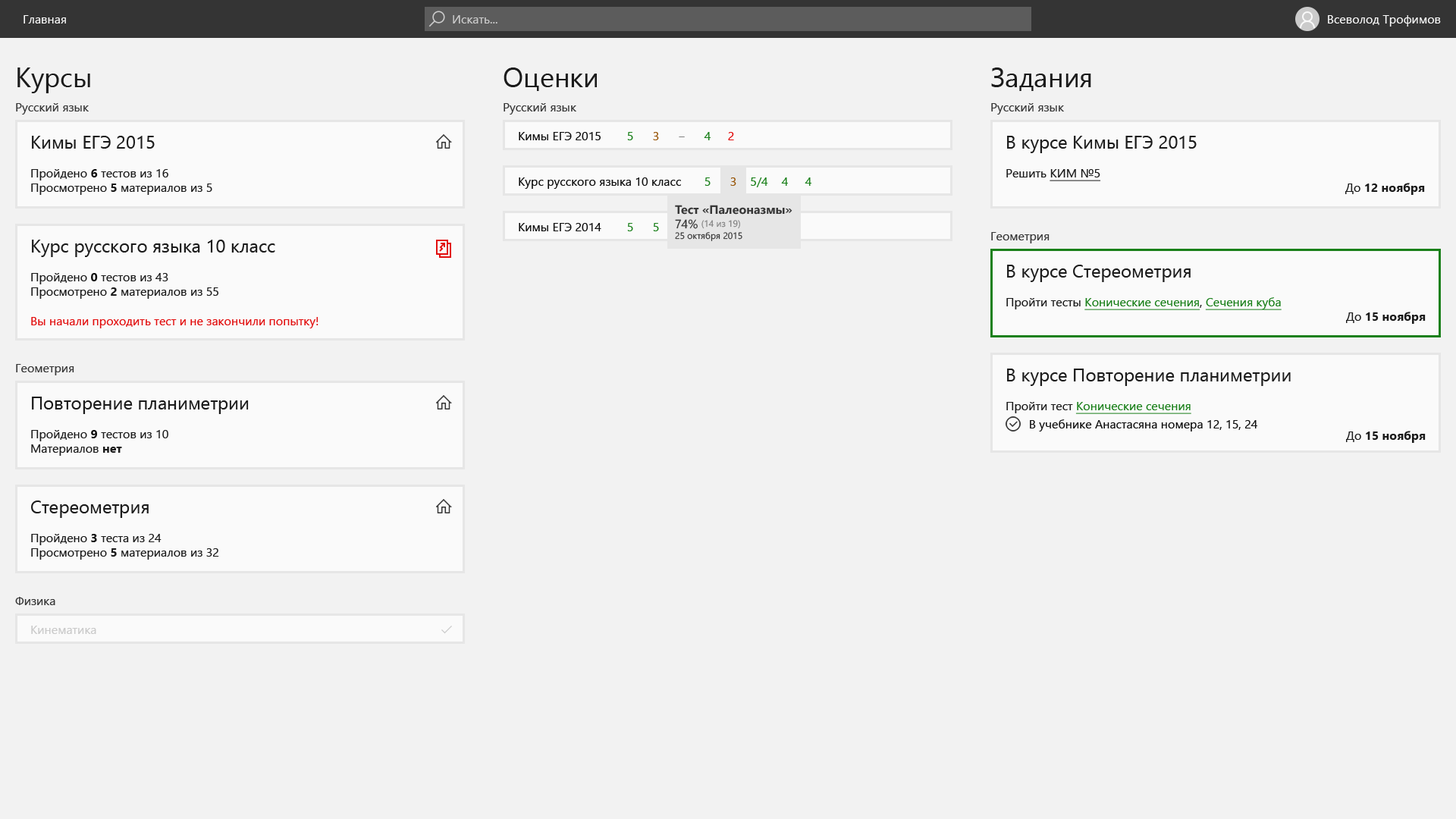
<style>
.page{position:relative;width:1456px;height:819px;background:#f2f2f2}
.page>*{position:absolute;margin:0}
.t1{font:12.1px "SegoeUI";color:#fafafa}
.t2{font:12.1px "SegoeUI";color:#cbcbcb}
.t3{font:27.3px "SegoeUI";color:#1b1b1b}
.t4{font:12.1px "SegoeUI";color:#373737}
.t5{font:12.1px "SegoeUI";color:#1b1b1b}
.t6{font:18.2px "SegoeUI";color:#1b1b1b}
.t7{font:12.1px "SegoeUI-Bold";color:#0f0f0f}
.t8{font:12.1px "SegoeUI-Bold";color:#1b1b1b}
.t9{font:12.1px "SegoeUI";color:#0f0f0f}
.t10{font:12.1px "SegoeUI";color:#1a801a}
.t11{font:12.1px "SegoeUI";color:#975405}
.t12{font:12.1px "SegoeUI";color:#808080}
.t13{font:12.1px "SegoeUI";color:#e20e0e}
.t14{font:12.1px "SegoeUI";color:#1b1b1b;text-decoration:underline}
.t15{font:12.1px "SegoeUI-Bold";color:#373737}
.t16{font:9.1px "SegoeUI";color:#808080}
.t17{font:9.1px "SegoeUI";color:#373737}
.t18{font:12.1px "SegoeUI";color:#1a801a;text-decoration:underline}
.t19{font:12.1px "SegoeUI";color:#cacaca}
</style>
<div class="page">
<p class="t1" style="left:24px;top:15px;width:42px;height:9px">Главная</p>
<p class="t2" style="left:453px;top:15px;width:44px;height:9px">Искать...</p>
<p class="t1" style="left:1328px;top:15px;width:113px;height:12px">Всеволод Трофимов</p>
<p class="t3" style="left:17px;top:67px;width:73px;height:26px">Курсы</p>
<p class="t3" style="left:504px;top:67px;width:93px;height:24px">Оценки</p>
<p class="t3" style="left:991px;top:67px;width:100px;height:24px">Задания</p>
<p class="t4" style="left:16px;top:103px;width:73px;height:12px">Русский язык</p>
<p class="t4" style="left:504px;top:103px;width:72px;height:12px">Русский язык</p>
<p class="t4" style="left:991px;top:103px;width:73px;height:12px">Русский язык</p>
<p class="t5" style="left:31px;top:136px;width:181px;height:59px"><span class="t6">Кимы ЕГЭ 2015<br></span><br>Пройдено <span class="t7">6</span> тестов из 16<br>Просмотрено <span class="t8">5</span> материалов из 5</p>
<p class="t9" style="left:519px;top:132px;width:82px;height:8px">Кимы ЕГЭ 2015</p>
<p class="t10" style="left:627px;top:132px;width:6px;height:8px">5</p>
<p class="t11" style="left:653px;top:132px;width:6px;height:8px">3</p>
<p class="t12" style="left:679px;top:136px;width:6px;height:1px">‒</p>
<p class="t10" style="left:704px;top:132px;width:7px;height:8px">4</p>
<p class="t13" style="left:728px;top:132px;width:6px;height:8px">2</p>
<p class="t6" style="left:1006px;top:136px;width:419px;height:59px">В курсе Кимы ЕГЭ 2015<br><span class="t5"><br>Решить </span><span class="t14">КИМ №5<br></span><span class="t5">До </span><span class="t8">12 ноября</span></p>
<p class="t9" style="left:519px;top:177px;width:162px;height:12px">Курс русского языка 10 класс</p>
<p class="t10" style="left:704px;top:177px;width:7px;height:9px">5</p>
<p class="t11" style="left:730px;top:177px;width:6px;height:9px">3</p>
<p class="t10" style="left:751px;top:177px;width:17px;height:10px">5/4</p>
<p class="t10" style="left:781px;top:177px;width:7px;height:9px">4</p>
<p class="t10" style="left:805px;top:177px;width:6px;height:9px">4</p>
<p class="t15" style="left:675px;top:205px;width:117px;height:36px">Тест «Палеоназмы»<br><span class="t4">74% </span><span class="t16">(14 из 19)<br></span><span class="t17">25 октября 2015</span></p>
<p class="t9" style="left:519px;top:223px;width:82px;height:8px">Кимы ЕГЭ 2014</p>
<p class="t10" style="left:627px;top:223px;width:6px;height:8px">5</p>
<p class="t10" style="left:653px;top:223px;width:6px;height:8px">5</p>
<p class="t4" style="left:991px;top:232px;width:59px;height:11px">Геометрия</p>
<p class="t13" style="left:31px;top:240px;width:287px;height:88px"><span class="t6">Курс русского языка 10 класс<br></span><span class="t5"><br>Пройдено </span><span class="t7">0</span><span class="t5"> тестов из 43<br>Просмотрено </span><span class="t8">2</span><span class="t5"> материалов из 55<br><br></span>Вы начали проходить тест и не закончили попытку!</p>
<p class="t6" style="left:1006px;top:265px;width:420px;height:59px">В курсе Стереометрия<br><span class="t5"><br>Пройти тесты </span><span class="t18">Конические сечения</span><span class="t5">, </span><span class="t18">Сечения куба <br></span><span class="t5">До </span><span class="t8">15 ноября</span></p>
<p class="t4" style="left:16px;top:364px;width:58px;height:11px">Геометрия</p>
<p class="t9" style="left:1006px;top:369px;width:420px;height:74px"><span class="t6">В курсе Повторение планиметрии<br></span><span class="t5"><br>Пройти тест </span><span class="t18">Конические сечения<br>       </span>В учебнике Анастасяна номера 12, 15, 24<br><span class="t5">До </span><span class="t8">15 ноября</span></p>
<p class="t5" style="left:31px;top:397px;width:218px;height:59px"><span class="t6">Повторение планиметрии<br></span><br>Пройдено <span class="t7">9</span> тестов из 10<br>Материалов <span class="t8">нет</span></p>
<p class="t5" style="left:31px;top:500px;width:188px;height:60px"><span class="t6">Стереометрия<br></span><br>Пройдено <span class="t7">3</span> теста из 24<br>Просмотрено <span class="t8">5</span> материалов из 32</p>
<p class="t4" style="left:15px;top:597px;width:40px;height:8px">Физика</p>
<p class="t19" style="left:31px;top:626px;width:65px;height:8px">Кинематика</p>
</div>
